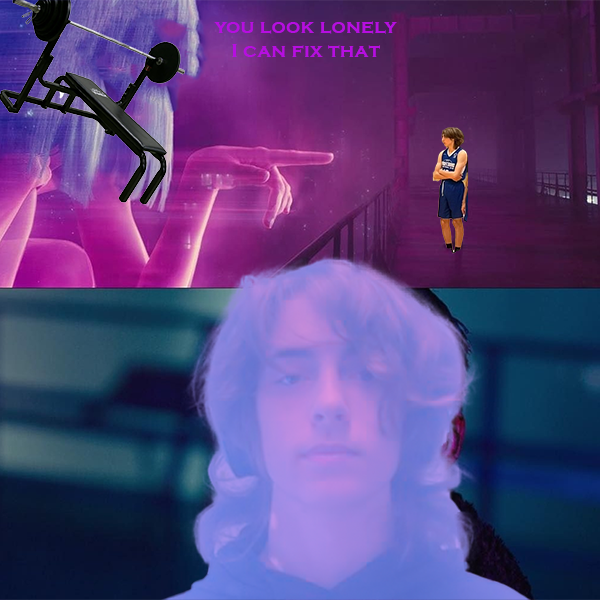
<style>
.page{position:relative;width:600px;height:600px}
.page>*{position:absolute;margin:0}
.t1{font:20.4px "CopperplateGothic-Bold";color:#b70ee1}
</style>
<div class="page">
<p class="t1" style="left:214px;top:21px;width:183px;height:36px;text-align:center">you look lonely<br>I can fix that</p>
</div>
